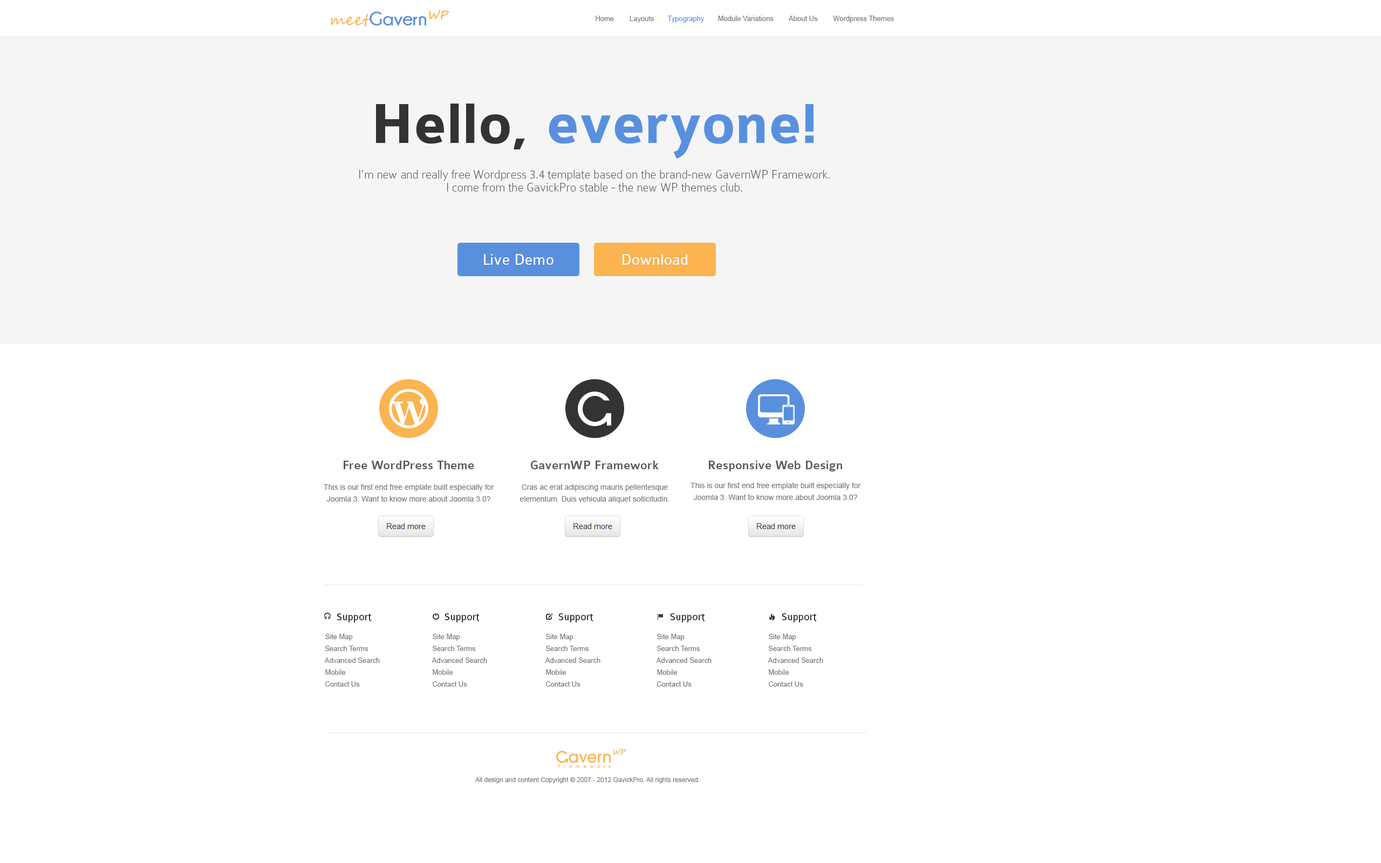
<style>
.page{position:relative;width:1381px;height:863px;background:#ffffff}
.page>*{position:absolute;margin:0}
.t1{font:19.4px "Champagne&Limousines-Bold";color:#5990de}
.t2{font:16.2px "SegoeScript";color:#fbb450}
.t3{font:19.4px "SegoeScript-Bold";color:#fbb450;font-style:italic}
.t4{font:7px "ArialMT";color:#777777}
.t5{font:7px "ArialMT";color:#5990de}
.t6{font:60.4px "Colaborate-Bold";color:#5990de}
.t7{font:60.4px "Colaborate-Bold";color:#333333}
.t8{font:12.9px/12.9px "Colaborate-Thin";color:#5c5c5c}
.t9{font:16.2px "Colaborate-Regular";color:#ffffff}
.t10{font:12.9px "Colaborate-Medium";color:#5c5c5c}
.t11{font:7.6px/11.9px "ArialMT";color:#777777}
.t12{font:10.8px "Colaborate-Regular";color:#333333}
.t13{font:7px/11.9px "ArialMT";color:#777777}
.t14{font:6.5px "ArialMT";color:#777777}
</style>
<div class="page">
<p class="t1" style="left:331px;top:10px;width:118px;height:17px"><span class="t2">meet</span>Gavern<span class="t3">WP</span></p>
<p class="t4" style="left:596px;top:16px;width:298px;height:7px">Home        Layouts       <span class="t5">Typography       </span>Module Variations        About Us        Wordpress Themes</p>
<p class="t6" style="left:376px;top:104px;width:438px;height:55px"><span class="t7">Hello, </span>everyone!</p>
<p class="t8" style="left:359px;top:169px;width:471px;height:23px;text-align:center">I’m new and really free Wordpress 3.4 template based on the brand-new GavernWP Framework.<br>I come from the GavickPro stable - the new WP themes club.</p>
<p class="t9" style="left:484px;top:254px;width:70px;height:11px">Live Demo</p>
<p class="t9" style="left:623px;top:254px;width:65px;height:11px">Download</p>
<p class="t10" style="left:344px;top:461px;width:130px;height:8px">Free WordPress Theme</p>
<p class="t10" style="left:531px;top:461px;width:128px;height:8px">GavernWP Framework</p>
<p class="t10" style="left:709px;top:461px;width:133px;height:11px">Responsive Web Design</p>
<p class="t11" style="left:324px;top:484px;width:170px;height:18px;text-align:center">This is our first end free emplate built especially for Joomla 3. Want to know more about Joomla 3.0?</p>
<p class="t11" style="left:520px;top:484px;width:150px;height:19px;text-align:center">Cras ac erat adipiscing mauris pellentesque elementum. Duis vehicula aliquet sollicitudin.</p>
<p class="t11" style="left:691px;top:482px;width:170px;height:18px;text-align:center">This is our first end free emplate built especially for Joomla 3. Want to know more about Joomla 3.0?</p>
<p class="t12" style="left:337px;top:613px;width:35px;height:10px">Support</p>
<p class="t12" style="left:445px;top:613px;width:35px;height:10px">Support</p>
<p class="t12" style="left:558px;top:613px;width:36px;height:10px">Support</p>
<p class="t12" style="left:670px;top:613px;width:35px;height:10px">Support</p>
<p class="t12" style="left:782px;top:613px;width:35px;height:10px">Support</p>
<p class="t13" style="left:324px;top:634px;width:56px;height:53px">Site Map<br>    Search Terms<br>    Advanced Search<br>    Mobile<br>    Contact Us</p>
<p class="t13" style="left:432px;top:634px;width:55px;height:53px">Site Map<br>    Search Terms<br>    Advanced Search<br>    Mobile<br>    Contact Us</p>
<p class="t13" style="left:545px;top:634px;width:56px;height:53px">Site Map<br>    Search Terms<br>    Advanced Search<br>    Mobile<br>    Contact Us</p>
<p class="t13" style="left:656px;top:634px;width:56px;height:53px">Site Map<br>    Search Terms<br>    Advanced Search<br>    Mobile<br>    Contact Us</p>
<p class="t13" style="left:768px;top:634px;width:55px;height:53px">Site Map<br>    Search Terms<br>    Advanced Search<br>    Mobile<br>    Contact Us</p>
<p class="t14" style="left:475px;top:778px;width:225px;height:5px">All design and content Copyright © 2007 - 2012 GavickPro. All rights reserved.</p>
</div>
